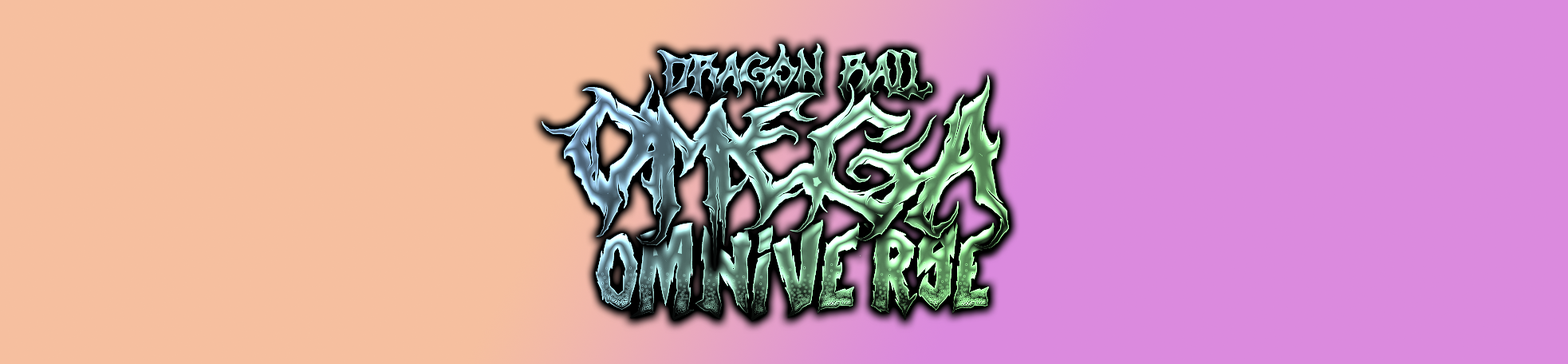
<style>
.page{position:relative;width:1568px;height:364px;background:#f6bf9f}
.page>*{position:absolute;margin:0}
.t1{font:52.4px "ZAMRUDS"}
.t2{font:212.5px "Heartless"}
.t3{font:75.5px "CurseoftheZombie"}
</style>
<div class="page">
<p class="t1" style="left:657px;top:43px;width:275px;height:62px">DRAGON BALL</p>
<p class="t2" style="left:542px;top:74px;width:467px;height:196px">OMEGA</p>
<p class="t3" style="left:596px;top:219px;width:399px;height:102px">OMNIVERSE</p>
</div>
